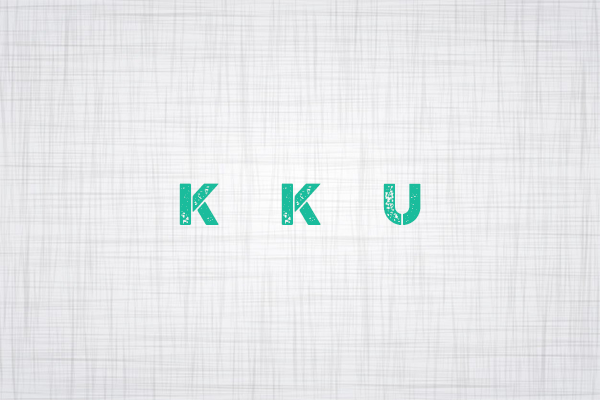
<style>
.page{position:relative;width:600px;height:400px}
.page>*{position:absolute;margin:0}
.t1{font:60px "Portico-StencilRough";letter-spacing:1em;color:#1abc9c;text-transform:uppercase}
</style>
<div class="page">
<p class="t1" style="left:179px;top:183px;width:242px;height:42px">KKU</p>
</div>
